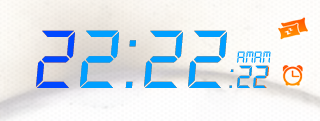
<style>
.page{position:relative;width:320px;height:121px}
.page>*{position:absolute;margin:0}
.t1{font:90px "DS-Digital-Italic";color:#0048ff}
.t2{font:90px "DS-Digital-Italic";color:#009fff}
.t3{font:18px "DS-Digital-Italic";color:#009fff}
.t4{font:35px "DS-Digital-Italic";color:#009fff}
</style>
<div class="page">
<p class="t1" style="left:36px;top:30px;width:83px;height:58px">2<span class="t2">2</span></p>
<p class="t2" style="left:80px;top:30px;width:39px;height:58px">2</p>
<p class="t2" style="left:144px;top:30px;width:39px;height:58px">2</p>
<p class="t2" style="left:188px;top:30px;width:39px;height:58px">2</p>
<p class="t2" style="left:125px;top:40px;width:11px;height:48px">:</p>
<p class="t3" style="left:237px;top:51px;width:17px;height:12px">AM</p>
<p class="t3" style="left:254px;top:51px;width:17px;height:12px">AM</p>
<p class="t4" style="left:237px;top:65px;width:16px;height:23px">2</p>
<p class="t4" style="left:253px;top:65px;width:16px;height:23px">2</p>
<p class="t4" style="left:229px;top:69px;width:5px;height:19px">:</p>
</div>
